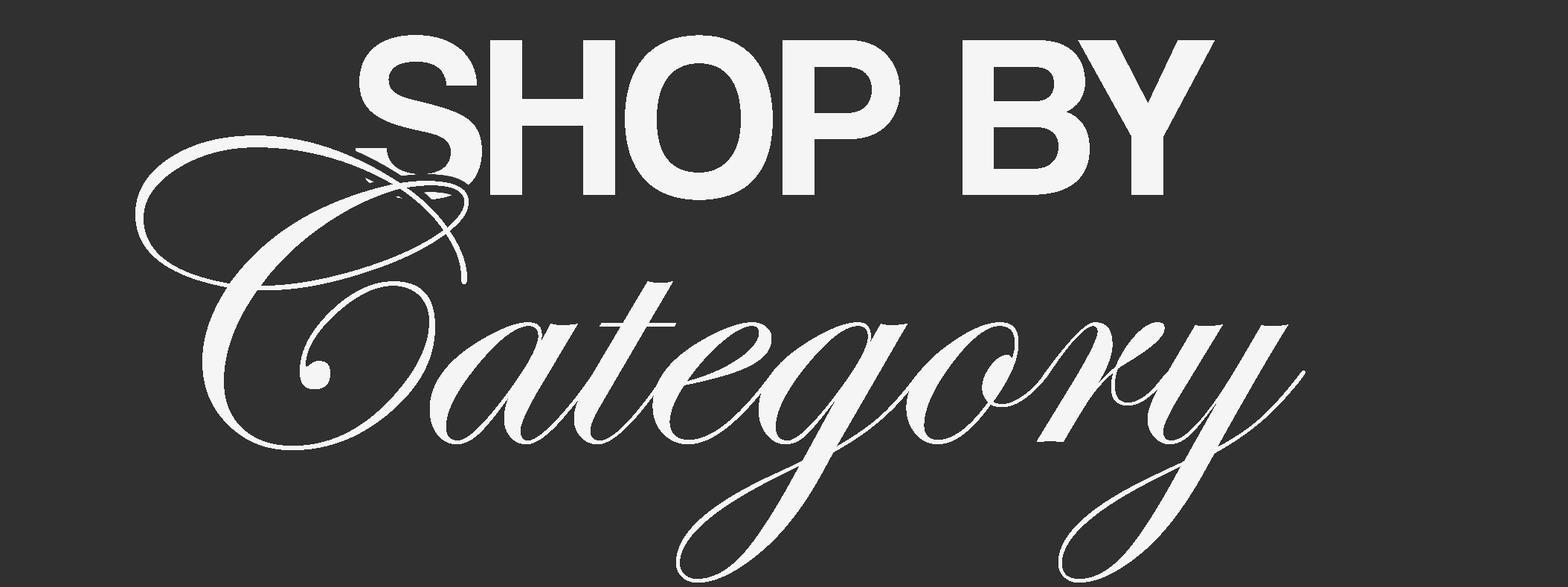
<style>
.page{position:relative;width:1568px;height:587px;background:#313031}
.page>*{position:absolute;margin:0}
.t1{font:232.4px "Coolvetica-Regular";color:#f5f5f5}
.t2{font:436.5px "EdwardianScriptITC";color:#f5f5f5}
</style>
<div class="page">
<p class="t1" style="left:356px;top:35px;width:859px;height:165px">SHOP BY</p>
<p class="t2" style="left:135px;top:135px;width:1170px;height:447px">Category</p>
</div>
